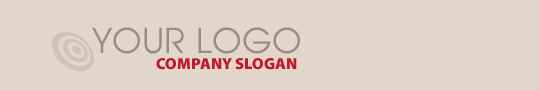
<style>
.page{position:relative;width:540px;height:90px;background:#e2d6ca}
.page>*{position:absolute;margin:0}
.t1{font:34px "Avian";color:#998c83;text-transform:uppercase}
.t2{font:16px "MyriadPro-Black";color:#bf1a2a;text-transform:uppercase}
</style>
<div class="page">
<p class="t1" style="left:92px;top:27px;width:208px;height:27px">YOUR LOGO</p>
<p class="t2" style="left:156px;top:58px;width:141px;height:12px">company slogan</p>
</div>
